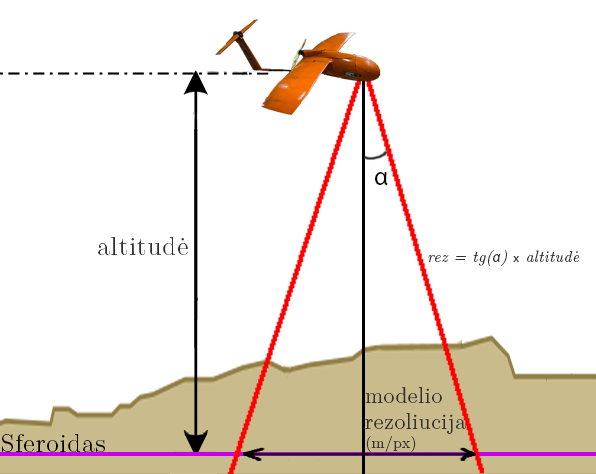
<style>
.page{position:relative;width:596px;height:474px;background:#ffffff}
.page>*{position:absolute;margin:0}
.t1{font:26px "MyriadPro-Regular";letter-spacing:0.025em;color:#000000}
.t2{font:26px "LMRoman12-Regular";letter-spacing:0.025em;color:#303030}
.t3{font:16px "LMRoman12-Italic";letter-spacing:0.025em;color:#303030}
.t4{font:15.7px "MyriadPro-Regular";letter-spacing:0.045em;color:#303030;font-style:italic;scale:0.9 1}
.t5{font:12px "MyriadPro-Regular";letter-spacing:0.025em;color:#303030}
.t6{font:22px "LMRoman12-Regular";letter-spacing:0.025em;color:#303030}
.t7{font:16px "LMRoman12-Regular";letter-spacing:0.025em;color:#303030}
.t8{font:26px "LMRoman12-Regular";letter-spacing:0.025em;color:#000000}
</style>
<div class="page">
<p class="t1" style="left:375px;top:172px;width:13px;height:13px">α</p>
<p class="t2" style="left:98px;top:237px;width:90px;height:18px">altitudė</p>
<p class="t3" style="left:428px;top:250px;width:151px;height:16px">rez = tg(<span class="t4">α</span>) <span class="t5">x</span> altitudė</p>
<p class="t6" style="left:365px;top:387px;width:101px;height:65px">modelio <br>rezoliucija<br><span class="t7">(m/px)</span></p>
<p class="t8" style="left:2px;top:434px;width:103px;height:18px">Sferoidas</p>
</div>
